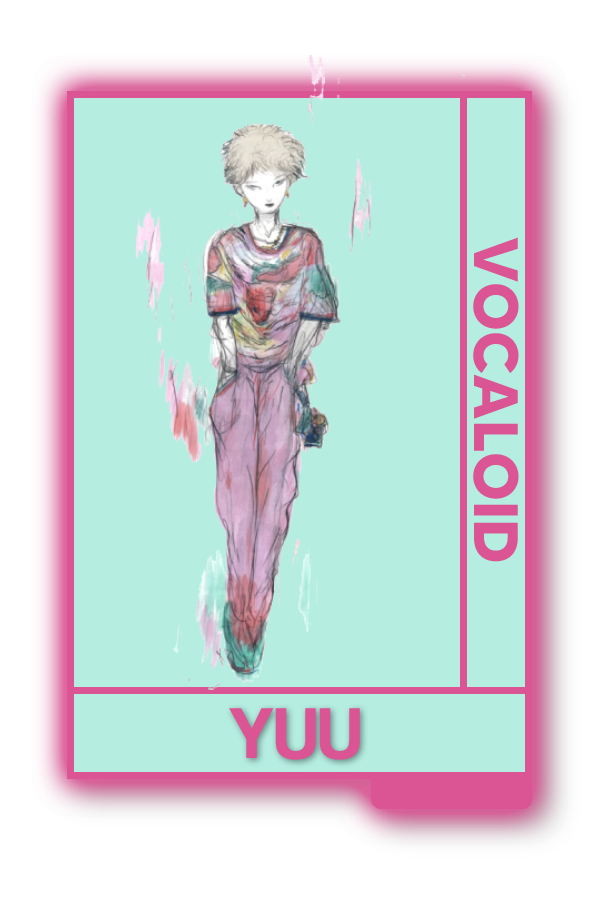
<style>
.page{position:relative;width:600px;height:900px;background:#b5ede1}
.page>*{position:absolute;margin:0}
.t1{font:62.5px "MADETOMMY-Bold";color:#db5493}
.t2{font:75px "CoolveticaRg-Regular";color:#db5493}
</style>
<div class="page">
<p class="t1" style="left:473px;top:237px;width:46px;height:325px;rotate:90deg">VOCALOID</p>
<p class="t2" style="left:229px;top:708px;width:131px;height:52px">YUU</p>
</div>
